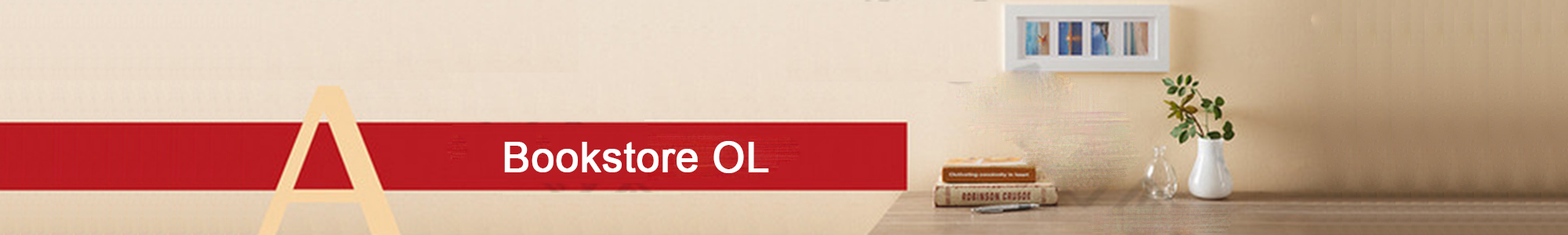
<style>
.page{position:relative;width:1568px;height:235px}
.page>*{position:absolute;margin:0}
.t1{font:41.6px "ArialMT";color:#ffffff;font-weight:bold}
</style>
<div class="page">
<p class="t1" style="left:504px;top:141px;width:265px;height:32px">Bookstore OL</p>
</div>
